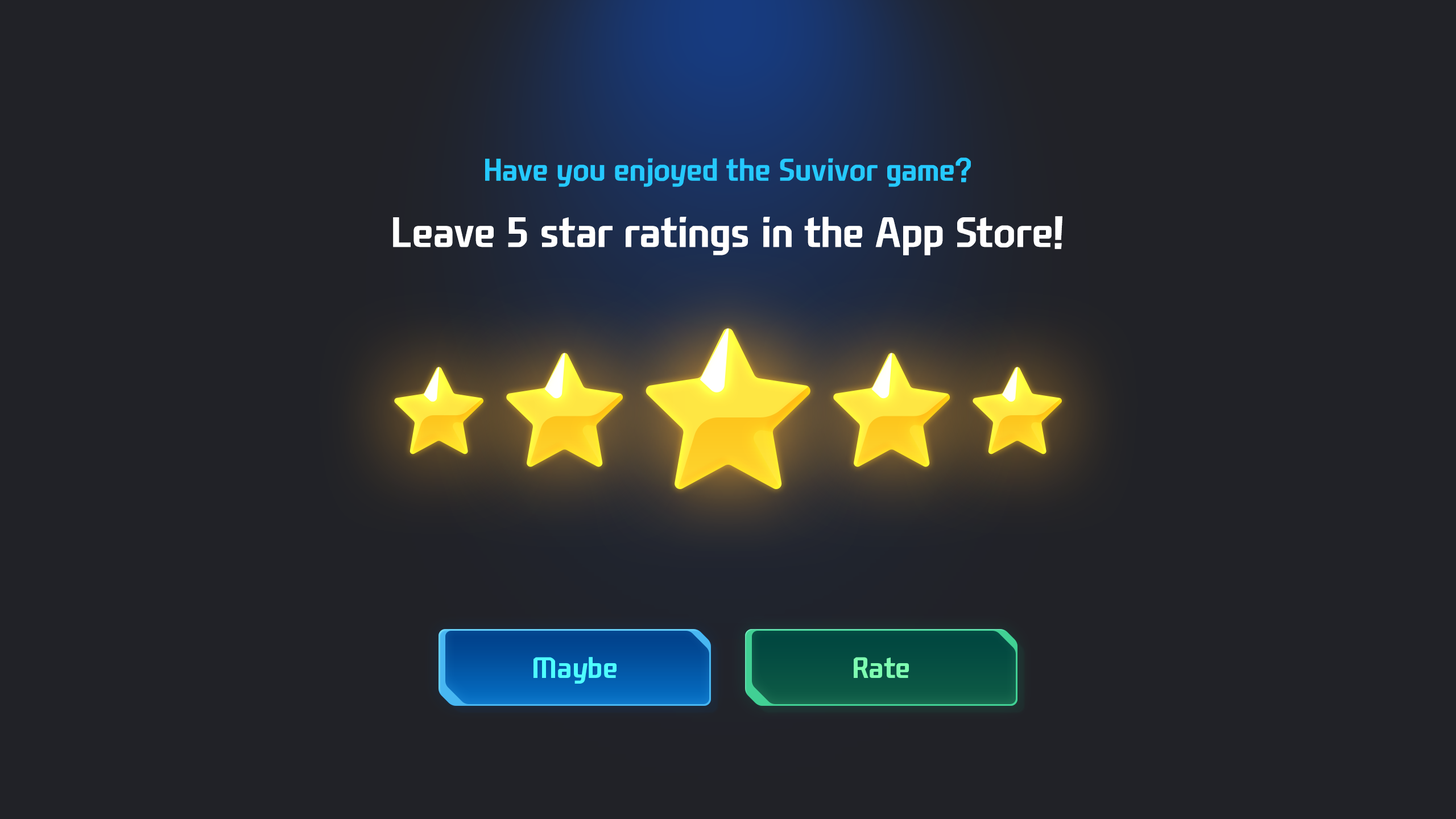
<style>
.page{position:relative;width:1456px;height:819px;background:#212227}
.page>*{position:absolute;margin:0}
.t1{font:30.3px "NEXONFootballGothicB";color:#25c9ff}
.t2{font:40.9px "NEXONFootballGothicB";color:#ffffff}
.t3{font:28.4px "NEXONFootballGothicB";color:#4efefe}
.t4{font:28.4px "NEXONFootballGothicB";color:#7effb1}
</style>
<div class="page">
<p class="t1" style="left:485px;top:158px;width:486px;height:29px">Have you enjoyed the Suvivor game?</p>
<p class="t2" style="left:393px;top:216px;width:669px;height:39px">Leave 5 star ratings in the App Store!</p>
<p class="t3" style="left:533px;top:657px;width:84px;height:27px">Maybe</p>
<p class="t4" style="left:854px;top:657px;width:55px;height:21px">Rate</p>
</div>
